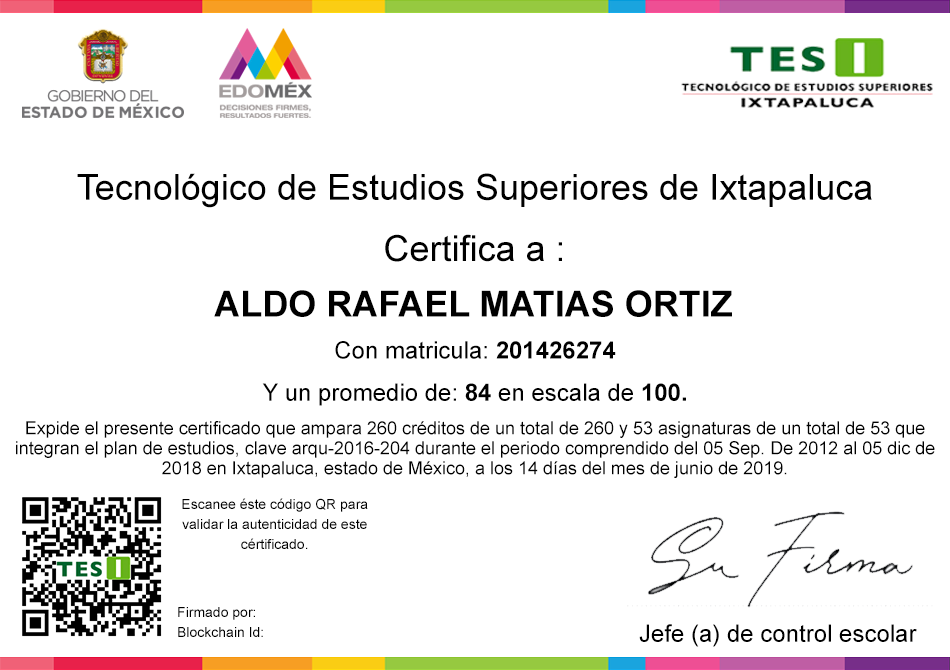
<style>
.page{position:relative;width:950px;height:670px;background:#ffffff}
.page>*{position:absolute;margin:0}
.t1{font:36px "ArialMT";color:#000000}
.t2{font:36px "Arial-BoldMT";color:#000000}
.t3{font:24px "ArialMT";color:#000000}
.t4{font:24px "Arial-BoldMT";color:#000000}
.t5{font:18px/10px "ArialMT";color:#000000}
.t6{font:14px/10px "ArialMT";color:#000000}
</style>
<div class="page">
<p class="t1" style="left:77px;top:173px;width:795px;height:35px">Tecnológico de Estudios Superiores de Ixtapaluca</p>
<p class="t1" style="left:385px;top:234px;width:177px;height:28px">Certifica a :</p>
<p class="t2" style="left:214px;top:290px;width:518px;height:27px">ALDO RAFAEL MATIAS ORTIZ</p>
<p class="t3" style="left:335px;top:341px;width:281px;height:18px">Con matricula:<span class="t4"> 201426274</span></p>
<p class="t3" style="left:262px;top:383px;width:424px;height:23px">Y un promedio de: <span class="t4">84</span> en escala de <span class="t4">100.</span></p>
<p class="t5" style="left:16px;top:421px;width:919px;height:57px;text-align:center">Expide el presente certificado que ampara 260 créditos de un total de 260 y 53 asignaturas de un total de 53 que <br><br>integran el plan de estudios, clave arqu-2016-204 durante el periodo comprendido del 05 Sep. De 2012 al 05 dic de <br><br>2018 en Ixtapaluca, estado de México, a los 14 días del mes de junio de 2019.</p>
<p class="t6" style="left:182px;top:498px;width:186px;height:51px;text-align:center">Escanee éste código QR para <br><br>validar la autenticidad de este <br><br>cértificado.</p>
<p class="t6" style="left:178px;top:607px;width:85px;height:30px">Firmado por:<br><br>Blockchain Id:</p>
<p class="t3" style="left:639px;top:624px;width:278px;height:23px">Jefe (a) de control escolar</p>
</div>
